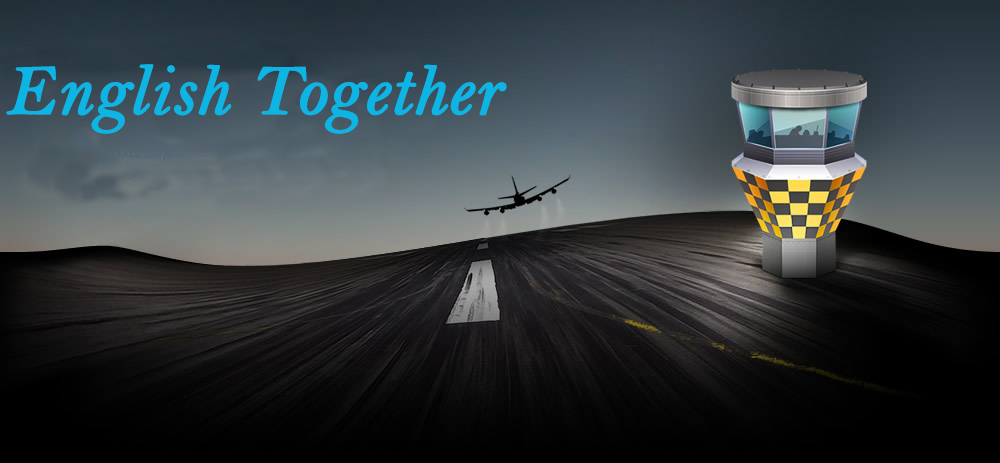
<style>
.page{position:relative;width:1000px;height:463px}
.page>*{position:absolute;margin:0}
.t1{font:72px "BellMTItalic";color:#0db5e5;font-weight:bold}
</style>
<div class="page">
<p class="t1" style="left:6px;top:64px;width:501px;height:70px">English Together</p>
</div>
